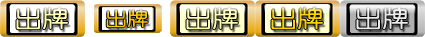
<style>
.page{position:relative;width:425px;height:37px}
.page>*{position:absolute;margin:0}
.t1{font:23.3px "YouYuan";color:#fffeb0;font-weight:bold;scale:1.14 1}
.t2{font:18.6px "YouYuan";color:#ffc600;font-weight:bold;scale:1.14 1}
.t3{font:23.3px "YouYuan";color:#ffd100;font-weight:bold;scale:1.14 1}
.t4{font:23.3px "YouYuan";color:#eaeaea;font-weight:bold;scale:1.14 1}
</style>
<div class="page">
<p class="t1" style="left:16px;top:7px;width:52px;height:23px">出牌</p>
<p class="t2" style="left:106px;top:9px;width:42px;height:19px">出牌</p>
<p class="t1" style="left:186px;top:7px;width:52px;height:23px">出牌</p>
<p class="t3" style="left:271px;top:7px;width:52px;height:23px">出牌</p>
<p class="t4" style="left:356px;top:7px;width:52px;height:23px">出牌</p>
</div>
